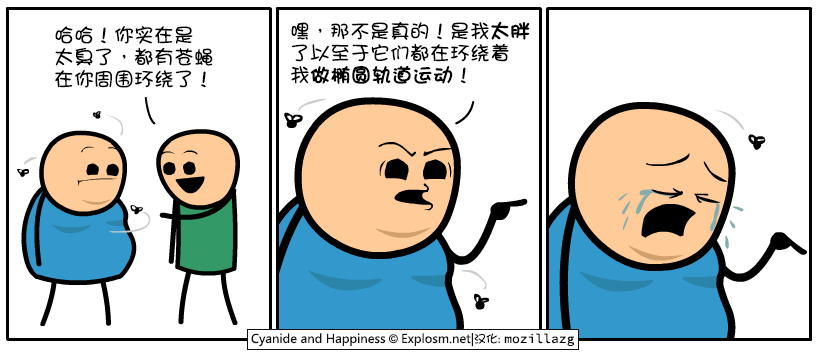
<style>
.page{position:relative;width:820px;height:355px;background:#ffffff}
.page>*{position:absolute;margin:0}
.t1{font:20px/22px "DFGirl";color:#000000}
.t2{font:20px/22px "DFGirl";color:#000000;font-weight:bold}
</style>
<div class="page">
<p class="t1" style="left:55px;top:26px;width:158px;height:62px">哈哈！你实在是<br>太臭了，都有苍蝇<br>在你周围环绕了！</p>
<p class="t1" style="left:290px;top:21px;width:240px;height:63px">嘿，那不是真的！是我<span class="t2">太胖<br></span>了以至于它们都在环绕着<br>我<span class="t2">做椭圆轨道运动</span>！</p>
</div>
